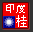
<style>
.page{position:relative;width:33px;height:32px;background:#f20000}
.page>*{position:absolute;margin:0}
.t1{font:10.4px "SimSun";color:#ffffff}
.t2{font:11.7px "SimSun";color:#ffffff}
</style>
<div class="page">
<p class="t1" style="left:6px;top:4px;width:19px;height:9px">印度</p>
<p class="t2" style="left:16px;top:15px;width:11px;height:12px">桂</p>
</div>
